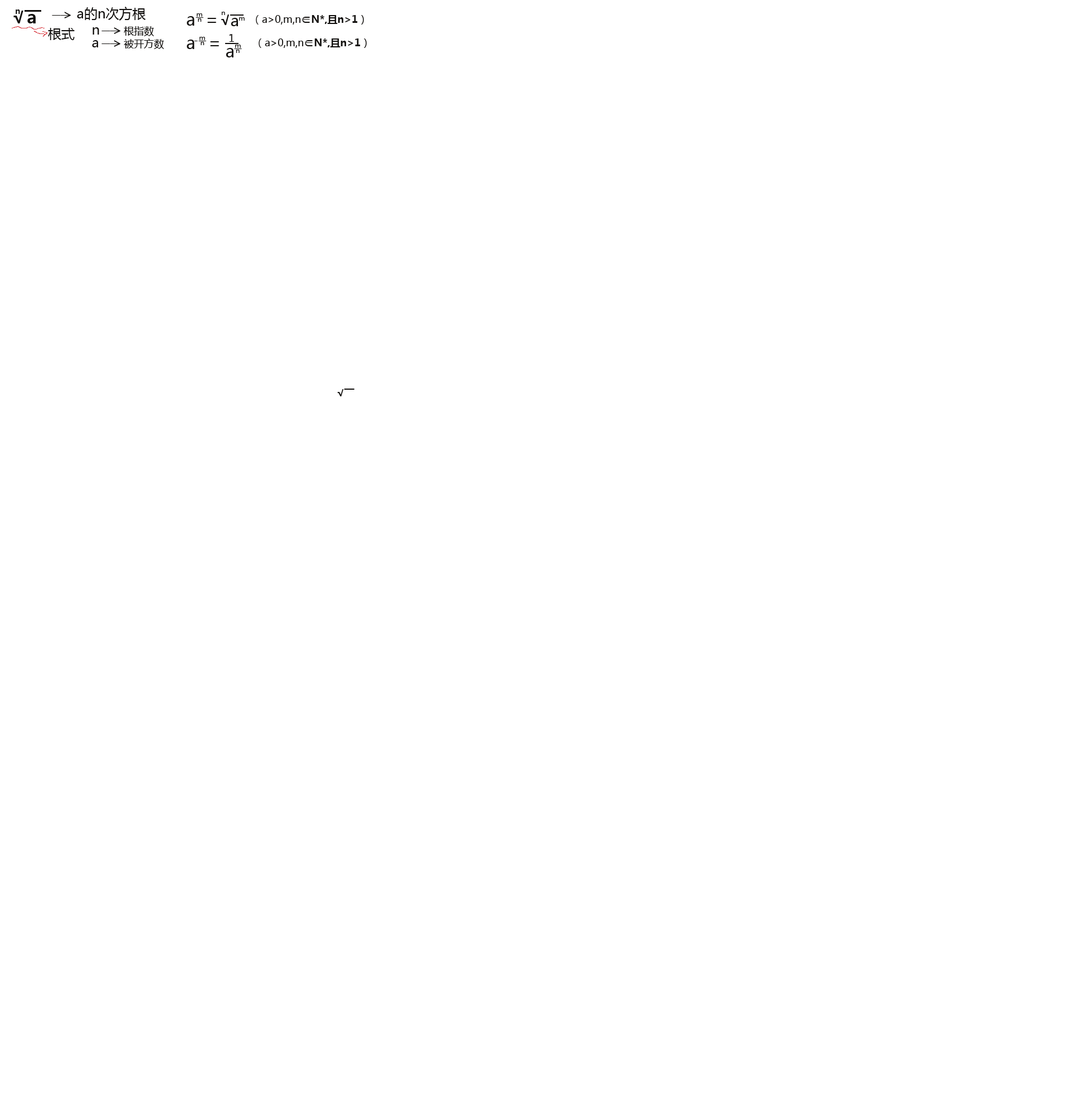
<style>
.page{position:relative;width:1070px;height:1115px;background:#ffffff}
.page>*{position:absolute;margin:0}
.t1{font:16.7px "MicrosoftYaHei-Bold";color:#110f0d}
.t2{font:7.8px "MicrosoftYaHei-Bold";color:#110f0d}
.t3{font:13.4px "MicrosoftYaHei";color:#110f0d}
.t4{font:16.7px "MicrosoftYaHei";color:#110f0d}
.t5{font:6.7px "MicrosoftYaHei";color:#110f0d}
.t6{font:13.4px "MicrosoftYaHei-Bold";color:#110f0d}
.t7{font:15.6px "MicrosoftYaHei";color:#110f0d}
.t8{font:10px "MicrosoftYaHei";color:#110f0d}
.t9{font:10px "MicrosoftYaHei-Bold";color:#110f0d}
</style>
<div class="page">
<p class="t1" style="left:13px;top:10px;width:28px;height:13px">√￣</p>
<p class="t2" style="left:16px;top:9px;width:4px;height:5px">n</p>
<p class="t1" style="left:27px;top:14px;width:9px;height:9px">a</p>
<p class="t3" style="left:77px;top:7px;width:69px;height:14px">a的n次方根</p>
<p class="t4" style="left:187px;top:16px;width:7px;height:10px">a</p>
<p class="t5" style="left:196px;top:17px;width:7px;height:1px">—</p>
<p class="t5" style="left:197px;top:13px;width:5px;height:4px">m</p>
<p class="t4" style="left:207px;top:18px;width:9px;height:5px">=</p>
<p class="t5" style="left:221px;top:12px;width:4px;height:3px">n</p>
<p class="t6" style="left:221px;top:14px;width:23px;height:11px">√￣</p>
<p class="t7" style="left:231px;top:18px;width:7px;height:8px">a</p>
<p class="t5" style="left:239px;top:17px;width:6px;height:4px">m</p>
<p class="t8" style="left:256px;top:15px;width:108px;height:10px">（a&gt;0,m,n<span class="t9">∈N*,且n&gt;1</span>）</p>
<p class="t3" style="left:48px;top:28px;width:27px;height:12px">根式</p>
<p class="t3" style="left:93px;top:27px;width:6px;height:8px">n</p>
<p class="t8" style="left:124px;top:26px;width:30px;height:10px">根指数</p>
<p class="t5" style="left:198px;top:18px;width:4px;height:4px">n</p>
<p class="t3" style="left:92px;top:40px;width:6px;height:7px">a</p>
<p class="t8" style="left:124px;top:38px;width:40px;height:11px">被开方数</p>
<p class="t4" style="left:187px;top:40px;width:7px;height:9px">a</p>
<p class="t5" style="left:194px;top:41px;width:4px;height:0px">_</p>
<p class="t5" style="left:198px;top:41px;width:8px;height:0px">—</p>
<p class="t5" style="left:199px;top:37px;width:6px;height:3px">m</p>
<p class="t5" style="left:201px;top:42px;width:4px;height:3px">n</p>
<p class="t4" style="left:210px;top:41px;width:9px;height:5px">=</p>
<p class="t8" style="left:229px;top:34px;width:5px;height:8px">1</p>
<p class="t8" style="left:259px;top:38px;width:108px;height:10px">（a&gt;0,m,n<span class="t9">∈N*,且n&gt;1</span>）</p>
<p class="t4" style="left:226px;top:48px;width:7px;height:9px">a</p>
<p class="t5" style="left:234px;top:48px;width:8px;height:1px">—</p>
<p class="t5" style="left:235px;top:45px;width:6px;height:3px">m</p>
<p class="t5" style="left:236px;top:50px;width:4px;height:3px">n</p>
<p class="t9" style="left:337px;top:388px;width:17px;height:8px">√￣</p>
</div>
